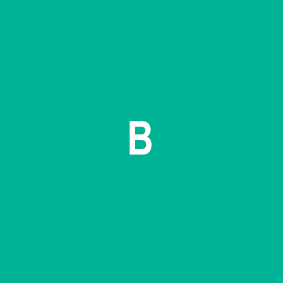
<style>
.page{position:relative;width:283px;height:283px;background:#00b395}
.page>*{position:absolute;margin:0}
.t1{font:46.2px "Arial-BoldMT";color:#ffffff;scale:0.78 1}
</style>
<div class="page">
<p class="t1" style="left:129px;top:121px;width:23px;height:34px">B</p>
</div>
